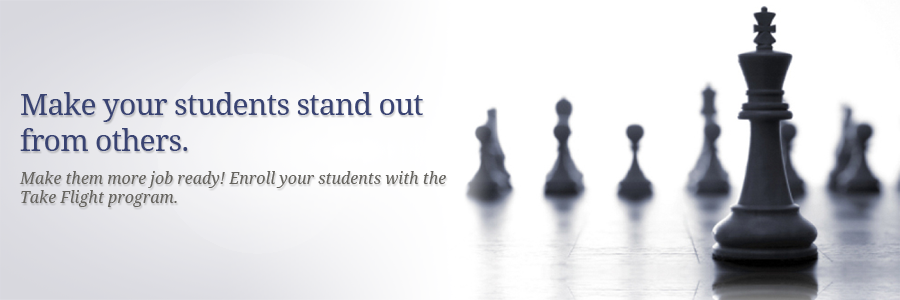
<style>
.page{position:relative;width:900px;height:300px;background:#ffffff}
.page>*{position:absolute;margin:0}
.t1{font:30px "DroidSerif";letter-spacing:-0.025em;color:#394372}
.t2{font:16px "DroidSerif-Italic";color:#65635e}
</style>
<div class="page">
<p class="t1" style="left:20px;top:92px;width:403px;height:59px">Make your students stand out from others.</p>
<p class="t2" style="left:19px;top:171px;width:427px;height:36px">Make them more job ready! Enroll your students with the Take Flight program.</p>
</div>
